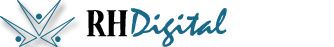
<style>
.page{position:relative;width:334px;height:47px;background:#ffffff}
.page>*{position:absolute;margin:0}
.t1{font:41.6px "NuevaStd-BoldCond";color:#000000;scale:1.04 1}
.t2{font:38.9px "Mistral";color:#1a6988;scale:1.11 1}
</style>
<div class="page">
<p class="t1" style="left:86px;top:10px;width:42px;height:27px">RH</p>
<p class="t2" style="left:131px;top:8px;width:96px;height:39px">Digital</p>
</div>
